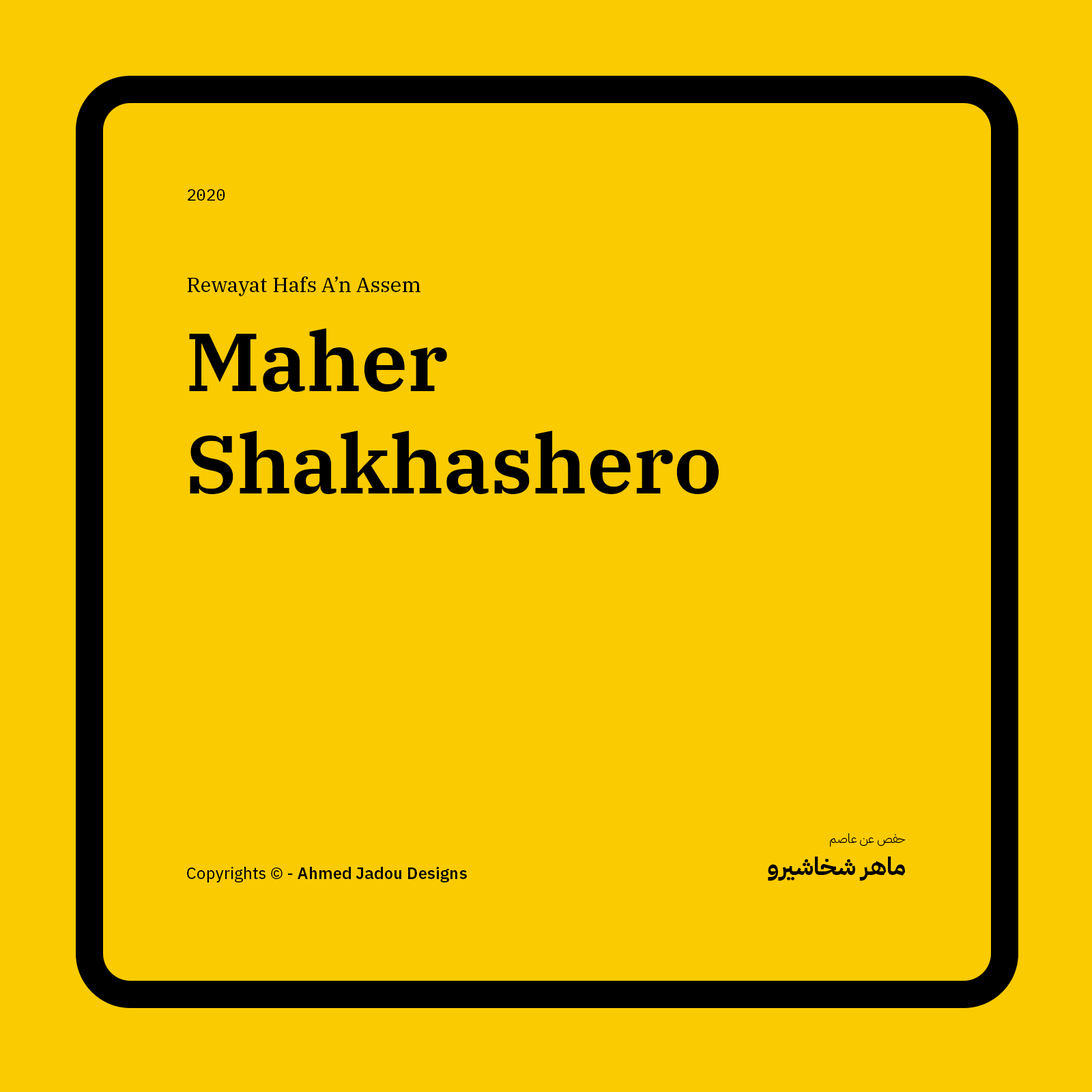
<style>
.page{position:relative;width:1092px;height:1092px;background:#facb00}
.page>*{position:absolute;margin:0}
.t1{font:16.4px "IBMPlexMono-Text";color:#000000}
.t2{font:20.5px "IBMPlexSerif-Text";color:#000000}
.t3{font:81.9px/102.7px "IBMPlexSerif-SemiBold";color:#000000}
.t4{font:12.3px "IBMPlexArabic-Light";color:#000000}
.t5{font:24.6px "IBMPlexArabic-Bold";color:#000000}
.t6{font:16.4px "IBMPlexSans-SemiBold";color:#000000}
.t7{font:16.4px "IBMPlexSans-Text";color:#000000}
</style>
<div class="page">
<p class="t1" style="left:188px;top:189px;width:37px;height:12px">2020</p>
<p class="t2" style="left:187px;top:276px;width:233px;height:20px">Rewayat Hafs A’n Assem</p>
<p class="t3" style="left:189px;top:328px;width:530px;height:166px">Maher Shakhashero</p>
<p class="t4" style="left:830px;top:833px;width:76px;height:14px">حفص عن عاصم</p>
<p class="t5" style="left:768px;top:857px;width:137px;height:24px">ماهر شخاشيرو</p>
<p class="t6" style="left:187px;top:867px;width:280px;height:15px"><span class="t7">Copyrights © - </span>Ahmed Jadou Designs</p>
</div>
